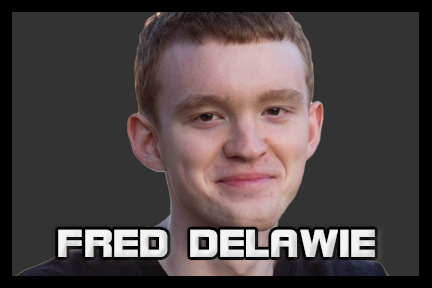
<style>
.page{position:relative;width:432px;height:288px;background:#333333}
.page>*{position:absolute;margin:0}
.t1{font:41.7px "BolsterBold";color:#f3f3f3}
</style>
<div class="page">
<p class="t1" style="left:58px;top:229px;width:317px;height:28px">FRED DELAWIE</p>
</div>
